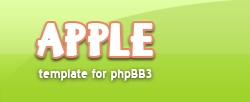
<style>
.page{position:relative;width:250px;height:102px}
.page>*{position:absolute;margin:0}
.t1{font:40px "KeiserSousa";color:#ffffff;scale:0.97 1}
.t2{font:16px "TRBlueHighwayBold";color:#ffffff}
</style>
<div class="page">
<p class="t1" style="left:37px;top:23px;width:116px;height:34px">APPLE</p>
<p class="t2" style="left:38px;top:69px;width:114px;height:12px">template for phpBB3</p>
</div>
